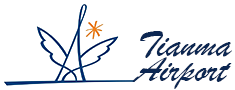
<style>
.page{position:relative;width:235px;height:90px;background:#ffffff}
.page>*{position:absolute;margin:0}
.t1{font:37.5px/25px "BrushScriptMT";color:#0b2753;font-style:italic}
</style>
<div class="page">
<p class="t1" style="left:132px;top:31px;width:100px;height:58px">Tianma<br>Airport</p>
</div>
